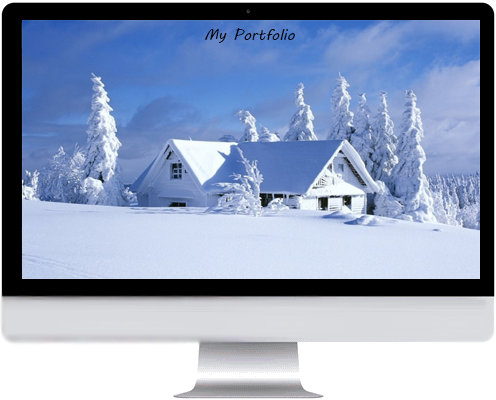
<style>
.page{position:relative;width:496px;height:400px}
.page>*{position:absolute;margin:0}
.t1{font:15px "MVBoli";color:#000000}
</style>
<div class="page">
<p class="t1" style="left:205px;top:28px;width:90px;height:15px">My Portfolio</p>
</div>
